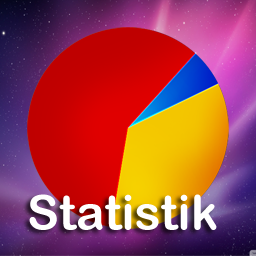
<style>
.page{position:relative;width:256px;height:256px}
.page>*{position:absolute;margin:0}
.t1{font:48px "ArialRoundedMTBold";color:#ffffff}
</style>
<div class="page">
<p class="t1" style="left:29px;top:194px;width:188px;height:36px">Statistik</p>
</div>
